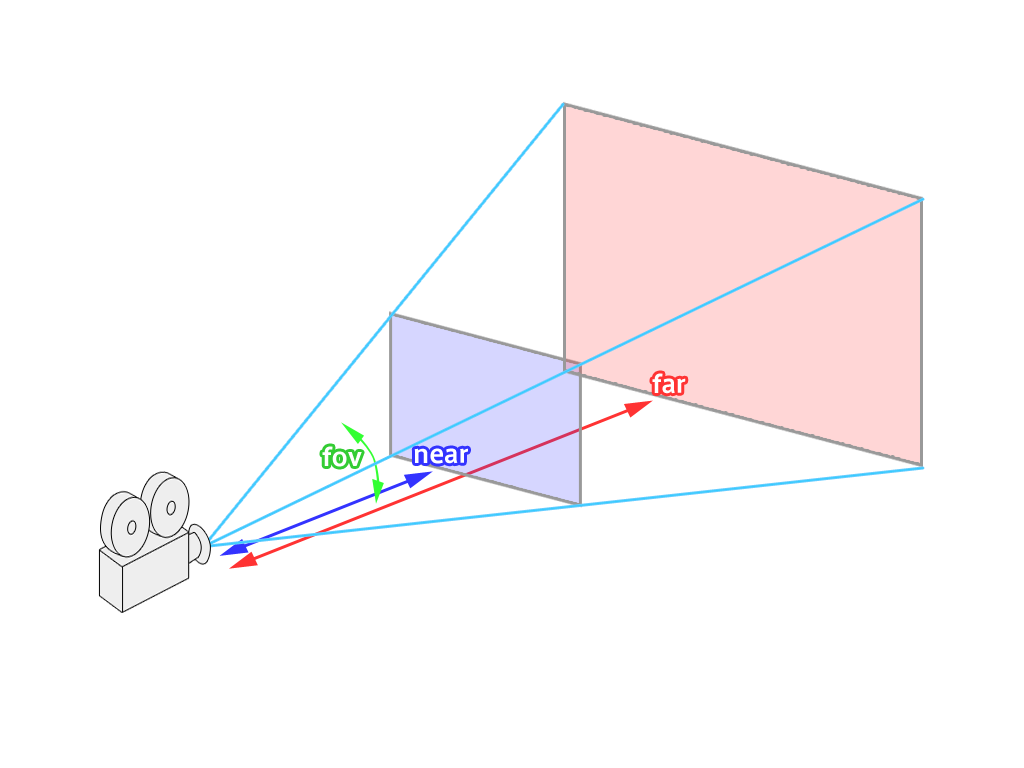
<style>
.page{position:relative;width:1024px;height:768px;background:#ffffff}
.page>*{position:absolute;margin:0}
.t1{font:24px "AxisStd-Bold";color:#ffffff}
</style>
<div class="page">
<p class="t1" style="left:652px;top:373px;width:34px;height:21px">far</p>
<p class="t1" style="left:322px;top:446px;width:40px;height:21px">fov</p>
<p class="t1" style="left:414px;top:448px;width:54px;height:16px">near</p>
</div>
